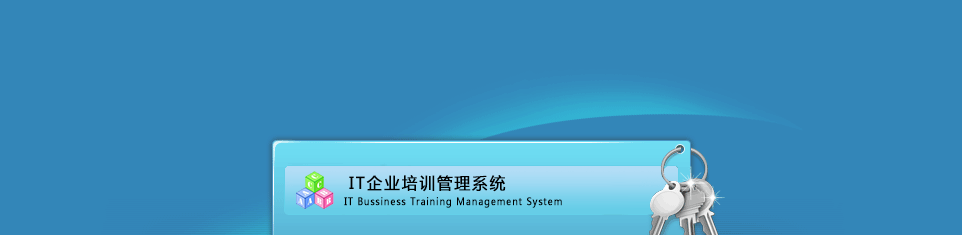
<style>
.page{position:relative;width:962px;height:235px;background:#3386b8}
.page>*{position:absolute;margin:0}
.t1{font:16.2px "MicrosoftYaHei";letter-spacing:0.1em;color:#000000;font-weight:bold;scale:0.96 1}
.t2{font:10px "MicrosoftYaHei";letter-spacing:0.075em;color:#000000;font-weight:bold;scale:0.9 1}
</style>
<div class="page">
<p class="t1" style="left:349px;top:175px;width:157px;height:17px">IT企业培训管理系统</p>
<p class="t2" style="left:344px;top:197px;width:218px;height:11px">IT Bussiness Training Management System</p>
</div>
